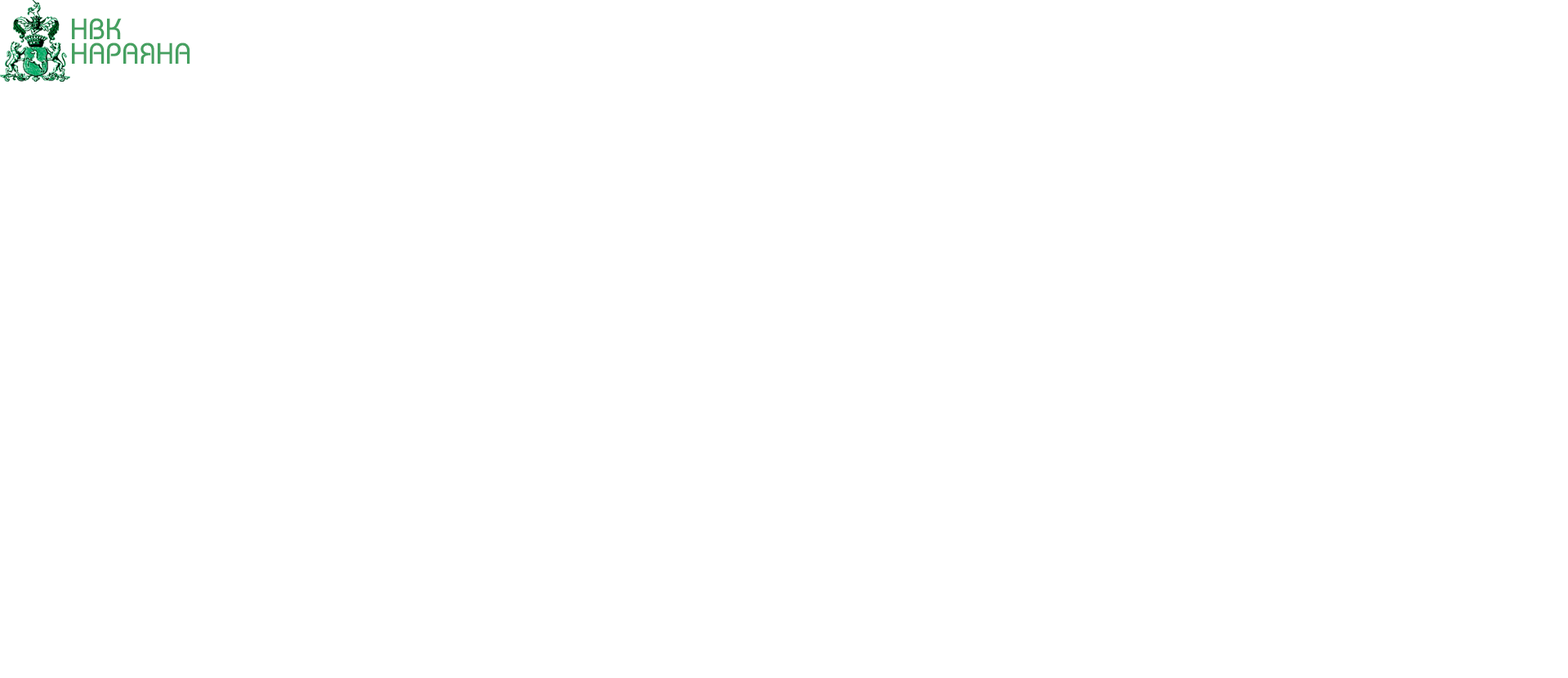
<style>
.page{position:relative;width:1568px;height:678px;background:#ffffff}
.page>*{position:absolute;margin:0}
.t1{font:29.4px/24.5px "Bauhaus";color:#45a060}
</style>
<div class="page">
<p class="t1" style="left:72px;top:18px;width:118px;height:46px">НВК<br>НАРАЯНА</p>
</div>
